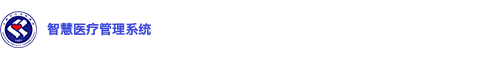
<style>
.page{position:relative;width:500px;height:59px;background:#ffffff}
.page>*{position:absolute;margin:0}
.t1{font:13px "HiraginoSansGB-W6";color:#3a47d8}
</style>
<div class="page">
<p class="t1" style="left:47px;top:22px;width:104px;height:14px">智慧医疗管理系统</p>
</div>
